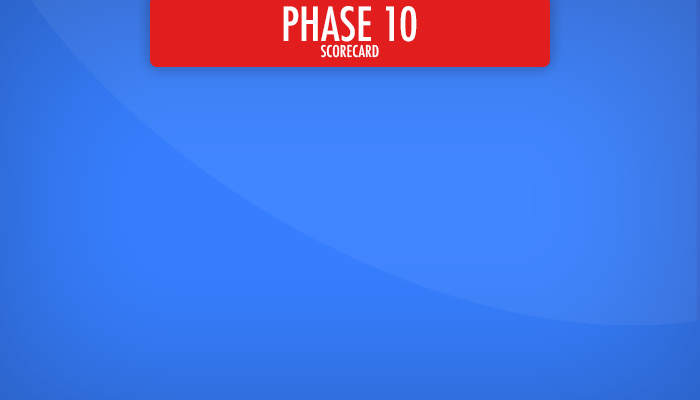
<style>
.page{position:relative;width:700px;height:400px}
.page>*{position:absolute;margin:0}
.t1{font:45.8px "Futura-CondensedMedium";color:#ffffff}
.t2{font:15.8px "Futura-CondensedMedium";color:#ffffff}
</style>
<div class="page">
<p class="t1" style="left:283px;top:6px;width:134px;height:36px">PHASE 10</p>
<p class="t2" style="left:321px;top:44px;width:58px;height:14px">SCORECARD</p>
</div>
